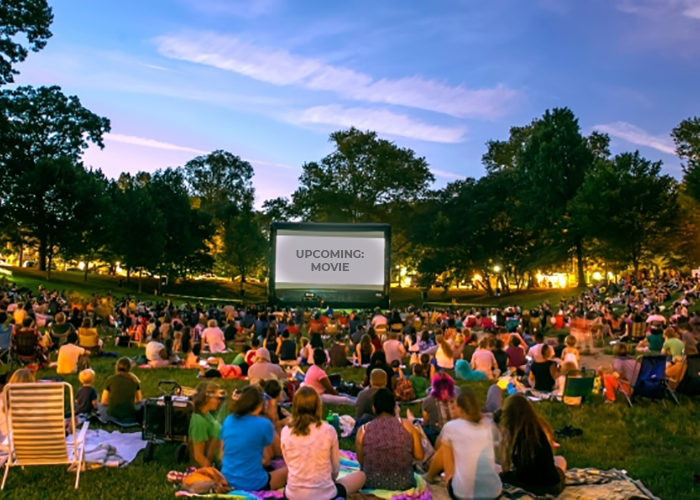
<style>
.page{position:relative;width:700px;height:500px}
.page>*{position:absolute;margin:0}
.t1{font:11px "Montserrat-Bold";color:#616161}
</style>
<div class="page">
<p class="t1" style="left:296px;top:250px;width:68px;height:21px;text-align:center">UPCOMING:<br>MOVIE</p>
</div>
